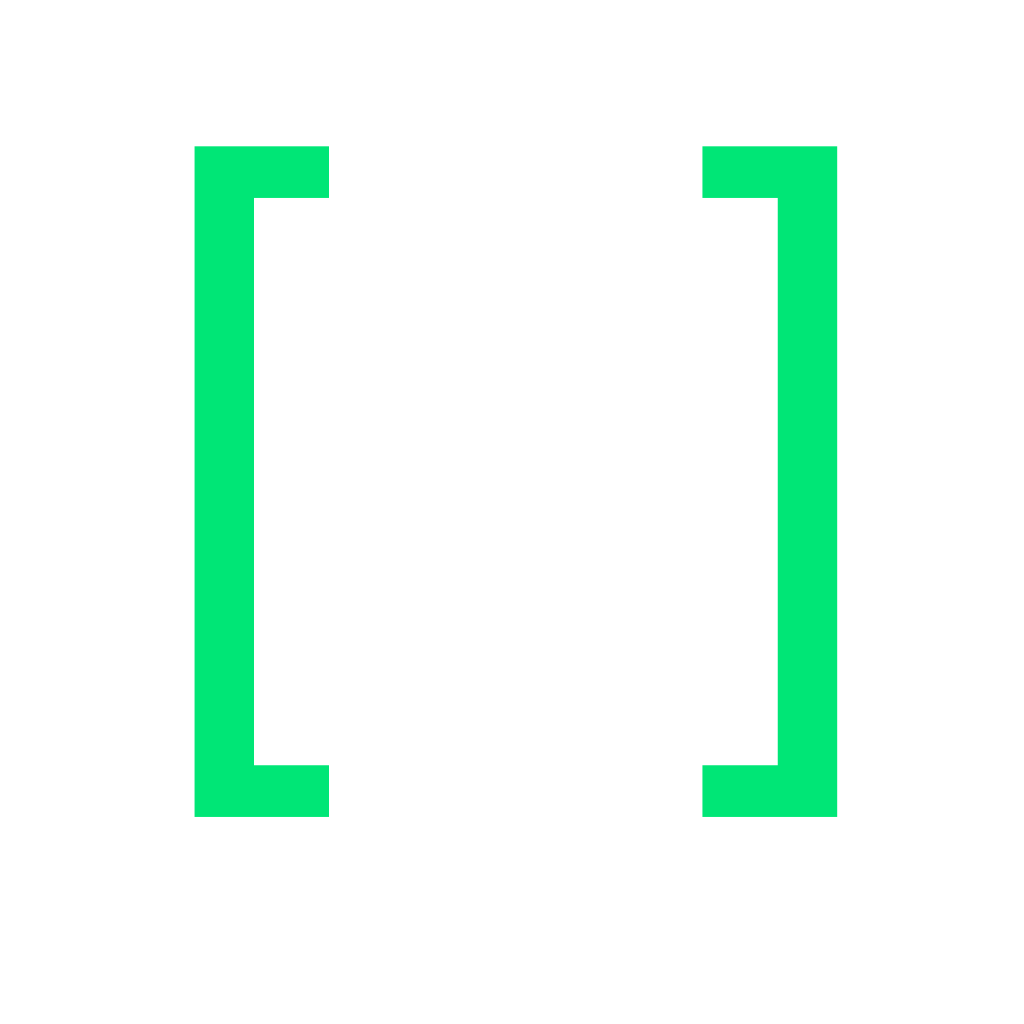
<style>
.page{position:relative;width:1024px;height:1024px;background:#ffffff}
.page>*{position:absolute;margin:0}
.t1{font:695px "RobotoMono-Regular";letter-spacing:0.14em;color:#00e676}
</style>
<div class="page">
<p class="t1" style="left:194px;top:146px;width:644px;height:671px">[]</p>
</div>
